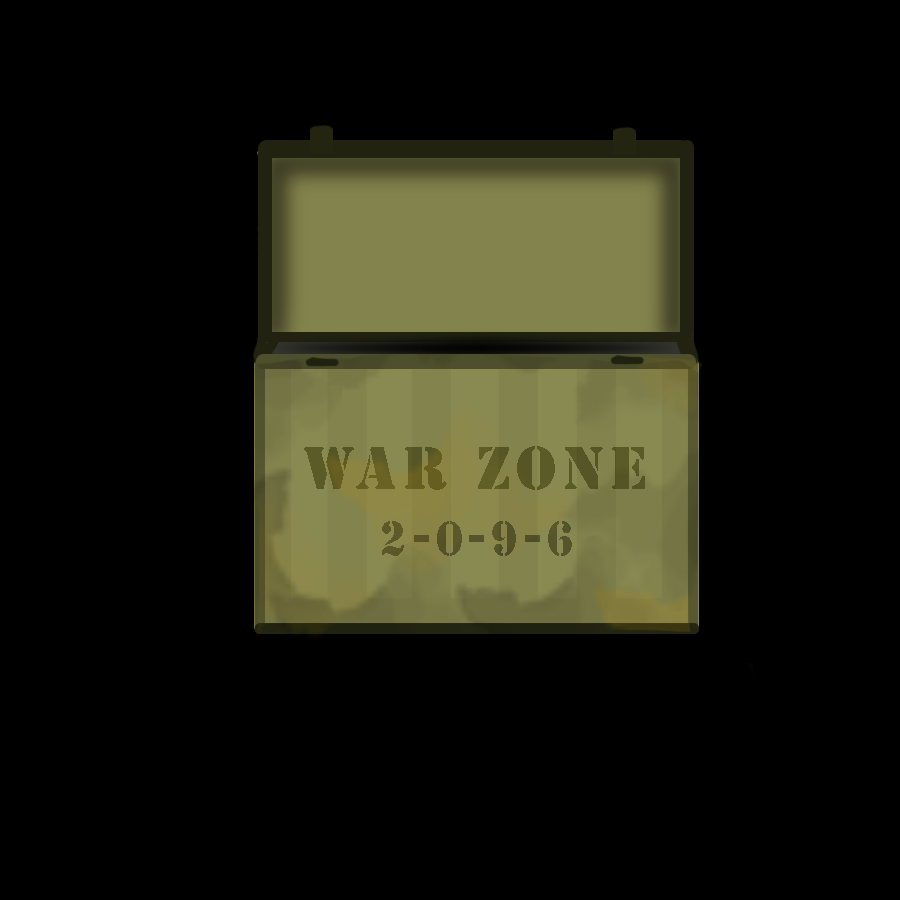
<style>
.page{position:relative;width:900px;height:900px;background:#000000}
.page>*{position:absolute;margin:0}
.t1{font:55.9px "StencilStd";letter-spacing:0.1em;color:#5b5b25}
.t2{font:43.9px "StencilStd";letter-spacing:0.1em;color:#55542a;scale:0.95 1}
</style>
<div class="page">
<p class="t1" style="left:304px;top:446px;width:341px;height:44px">WAR ZONE</p>
<p class="t2" style="left:382px;top:521px;width:190px;height:35px">2-0-9-6</p>
</div>
